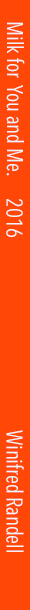
<style>
.page{position:relative;width:30px;height:610px;background:#ff4708}
.page>*{position:absolute;margin:0}
.t1{font:22.4px "AvenirNextCondensed-Regular";color:#eff3f6;scale:0.94 1}
</style>
<div class="page">
<p class="t1" style="left:6px;top:22px;width:19px;height:154px;rotate:90deg">Milk for  You and Me.</p>
<p class="t1" style="left:6px;top:199px;width:17px;height:38px;rotate:90deg">2016</p>
<p class="t1" style="left:6px;top:430px;width:18px;height:122px;rotate:90deg">Winifred Randell</p>
</div>
